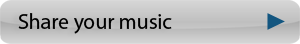
<style>
.page{position:relative;width:300px;height:44px}
.page>*{position:absolute;margin:0}
.t1{font:21.8px "MyriadPro-Regular";color:#000000}
</style>
<div class="page">
<p class="t1" style="left:18px;top:13px;width:154px;height:21px">Share your music</p>
</div>
